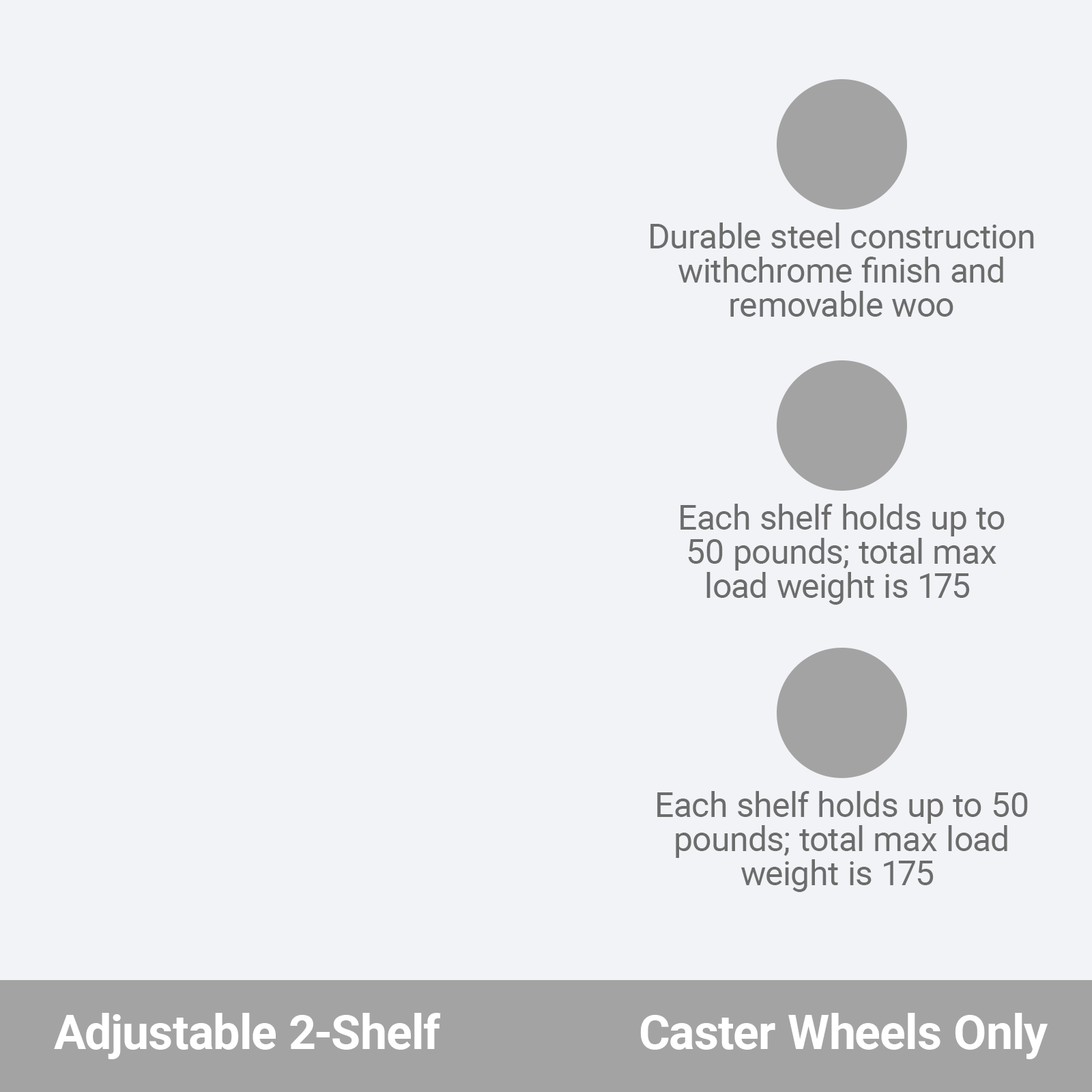
<style>
.page{position:relative;width:1092px;height:1092px;background:#f2f3f6}
.page>*{position:absolute;margin:0}
.t1{font:34.1px/34.1px "Roboto-Regular";color:#6c6c6c}
.t2{font:47.8px "Roboto-Bold";color:#ffffff}
</style>
<div class="page">
<p class="t1" style="left:650px;top:222px;width:384px;height:95px;text-align:center">Durable steel construction<br>withchrome finish and<br>removable woo</p>
<p class="t1" style="left:680px;top:504px;width:325px;height:101px;text-align:center">Each shelf holds up to<br>50 pounds; total max<br>load weight is 175</p>
<p class="t1" style="left:657px;top:791px;width:371px;height:101px;text-align:center">Each shelf holds up to 50<br>pounds; total max load<br>weight is 175</p>
<p class="t2" style="left:54px;top:1013px;width:387px;height:46px">Adjustable 2-Shelf</p>
<p class="t2" style="left:640px;top:1013px;width:408px;height:46px">Caster Wheels Only</p>
</div>
